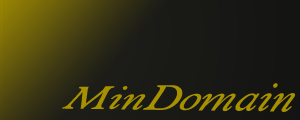
<style>
.page{position:relative;width:300px;height:120px}
.page>*{position:absolute;margin:0}
.t1{font:36px "MPlantin-Italic";color:#a79100;scale:1.25 1}
</style>
<div class="page">
<p class="t1" style="left:62px;top:83px;width:233px;height:29px">MinDomain</p>
</div>
